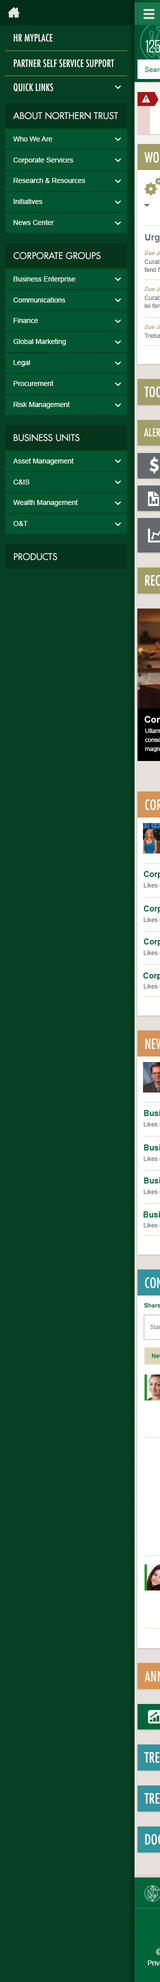
<style>
.page{position:relative;width:160px;height:1982px;background:#064022}
.page>*{position:absolute;margin:0}
.t1{font:10px "Futura-Condensed";letter-spacing:0.005em;color:#ffffff;text-transform:uppercase}
.t2{font:9px "Futura";letter-spacing:0.005em;color:#ffffff;text-transform:uppercase}
.t3{font:7px/19.4px "ArialMT";color:#ffffff}
</style>
<div class="page">
<p class="t1" style="left:14px;top:34px;width:39px;height:8px">HR MyPlace</p>
<p class="t1" style="left:14px;top:59px;width:101px;height:9px">partner Self Service Support</p>
<p class="t1" style="left:14px;top:83px;width:40px;height:9px">Quick Links</p>
<p class="t2" style="left:13px;top:112px;width:105px;height:8px">About Northern Trust</p>
<p class="t3" style="left:13px;top:137px;width:73px;height:88px">Who We Are<br>Corporate Services<br>Research &amp; Resources<br>Initiatives<br>News Center</p>
<p class="t2" style="left:14px;top:252px;width:87px;height:8px">Corporate Groups</p>
<p class="t3" style="left:14px;top:276px;width:62px;height:133px">Business Enterprise<br>Communications<br>Finance<br>Global Marketing<br>Legal<br>Procurement<br>Risk Management</p>
<p class="t2" style="left:14px;top:434px;width:66px;height:8px">Business Units</p>
<p class="t3" style="left:13px;top:458px;width:65px;height:68px">Asset Management<br>C&amp;IS<br>Wealth Management<br>O&amp;T</p>
<p class="t2" style="left:14px;top:553px;width:43px;height:8px">Products</p>
</div>
